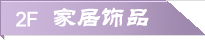
<style>
.page{position:relative;width:205px;height:40px;background:#ffffff}
.page>*{position:absolute;margin:0}
.t1{font:20px "ArialMT";letter-spacing:-0.06em;color:#ffffff;font-weight:bold}
.t2{font:25px "STLiti";letter-spacing:-0.06em;color:#ffffff;font-weight:bold}
</style>
<div class="page">
<p class="t1" style="left:16px;top:11px;width:22px;height:16px">2F</p>
<p class="t2" style="left:53px;top:7px;width:96px;height:20px">家居饰品</p>
</div>
